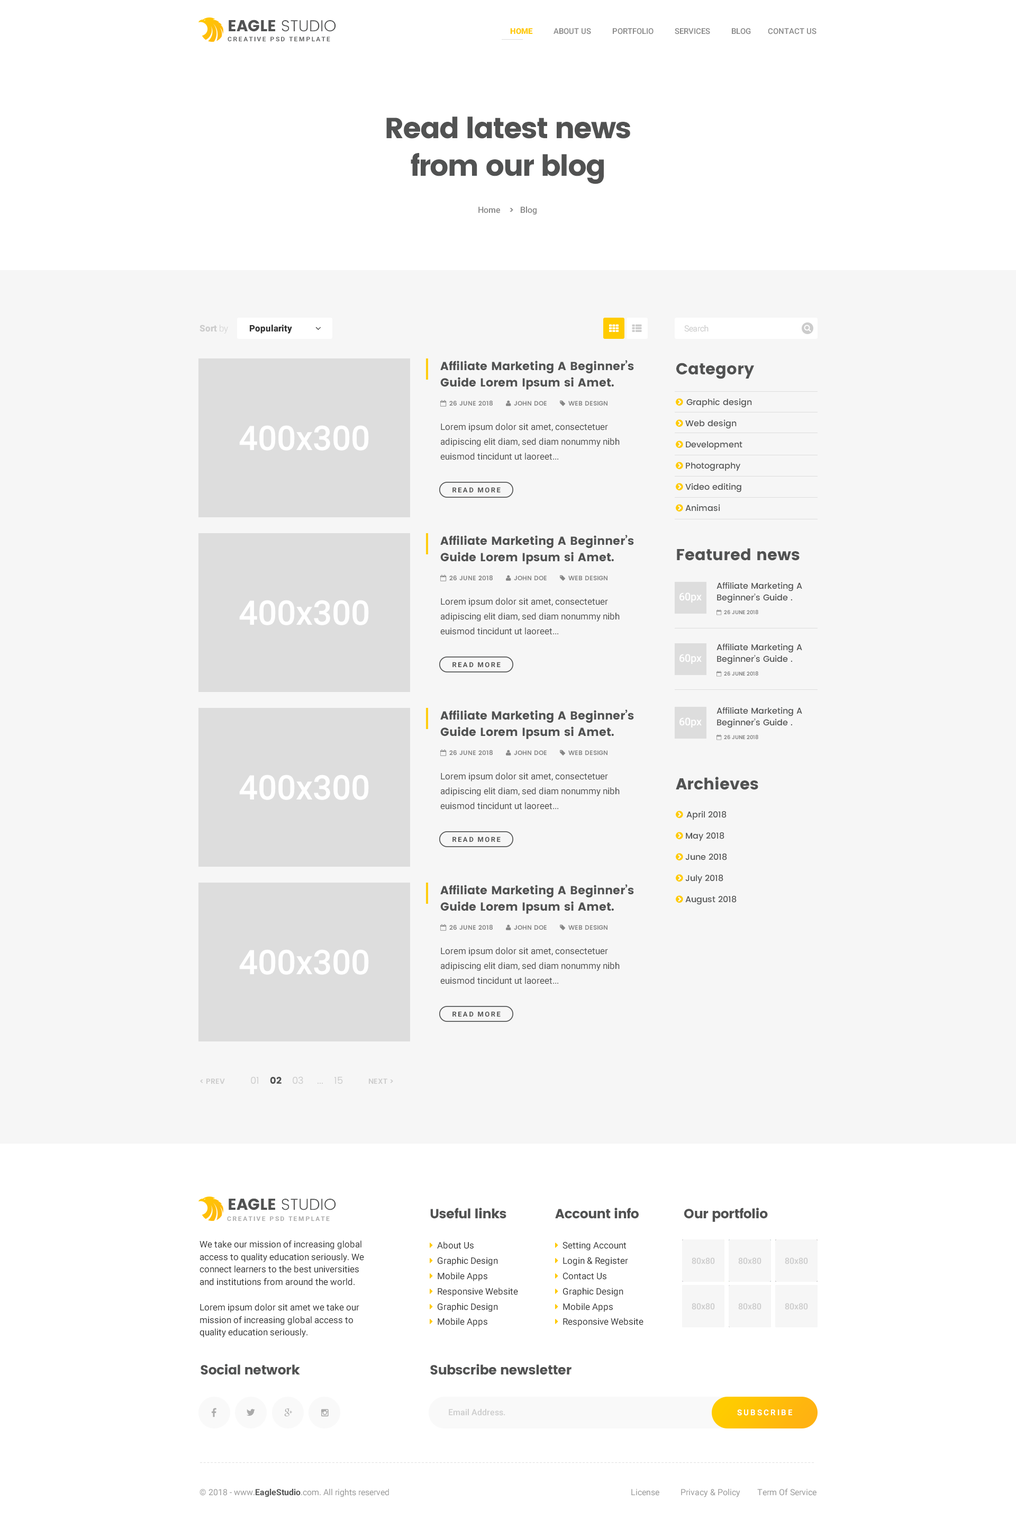
<style>
.page{position:relative;width:1016px;height:1528px;background:#f6f6f6}
.page>*{position:absolute;margin:0}
.t1{font:15.9px "Poppins-Light";color:#515253}
.t2{font:15.9px "Poppins";color:#515253}
.t3{font:7.9px "Roboto-Medium";color:#878787}
.t4{font:7.9px "Roboto-Black";color:#ffca00}
.t5{font:6.4px "Roboto-Bold";letter-spacing:0.2em;color:#636465}
.t6{font:29.1px/37.9px "Poppins";letter-spacing:-0.04em;color:#515252}
.t7{font:8.5px "Roboto-Medium";color:#878787}
.t8{font:8.5px "Poppins-SemiBold";color:#878787}
.t9{font:8.5px "Roboto-Regular";letter-spacing:-0.02em;color:#cccccc}
.t10{font:11.6px/16.3px "Poppins";color:#515252}
.t11{font:15.9px "Poppins";color:#515252}
.t12{font:9px/14.9px "Roboto-Regular";color:#4c4c4c}
.t13{font:6.9px "Roboto-Bold";letter-spacing:0.2em;color:#515252}
.t14{font:8.5px/11.9px "Poppins-Medium";color:#515252}
.t15{font:9.5px "Poppins-Regular";color:#cccccc}
.t16{font:7.4px "Poppins-SemiBold";color:#cccccc}
.t17{font:9.5px "Poppins";color:#515252}
.t18{font:15.9px "Poppins-Light";color:#515252}
.t19{font:6.4px "Roboto-Bold";letter-spacing:0.2em;color:#aaaaaa}
.t20{font:13.2px "Poppins";letter-spacing:-0.02em;color:#515252}
.t21{font:9px/12.6px "Roboto-Regular";color:#333333}
.t22{font:8.5px "Roboto-Medium";color:#cccccc}
.t23{font:7.9px "Roboto-Bold";letter-spacing:0.2em;color:#ffffff}
.t24{font:5.3px "Poppins-Light";letter-spacing:0.076em}
.t25{font:8.5px "Roboto-Regular";color:#999999}
.t26{font:8.5px "Roboto-Bold";color:#515252}
</style>
<div class="page">
<p class="t1" style="left:229px;top:20px;width:107px;height:12px"><span class="t2">EAGLE</span> STUDIO</p>
<p class="t3" style="left:510px;top:28px;width:307px;height:6px"><span class="t4">HOME </span>         ABOUT US          PORTFOLIO          SERVICES          BLOG        CONTACT US</p>
<p class="t5" style="left:228px;top:37px;width:102px;height:4px">CREATIVE PSD TEMPLATE</p>
<p class="t6" style="left:386px;top:116px;width:245px;height:68px;text-align:center">Read latest news from our blog</p>
<p class="t7" style="left:479px;top:206px;width:58px;height:9px">Home    <span class="t8">&gt;</span>   Blog</p>
<p class="t9" style="left:685px;top:325px;width:24px;height:7px">Search</p>
<p class="t10" style="left:440px;top:360px;width:194px;height:30px">Affiliate Marketing A Beginner’s Guide Lorem Ipsum si Amet.</p>
<p class="t11" style="left:677px;top:363px;width:77px;height:16px">Category</p>
<p class="t12" style="left:440px;top:423px;width:180px;height:37px">Lorem ipsum dolor sit amet, consectetuer adipiscing elit diam, sed diam nonummy nibh euismod tincidunt ut laoreet...</p>
<p class="t13" style="left:453px;top:487px;width:48px;height:6px">READ MORE</p>
<p class="t10" style="left:440px;top:535px;width:194px;height:29px">Affiliate Marketing A Beginner’s Guide Lorem Ipsum si Amet.</p>
<p class="t11" style="left:677px;top:548px;width:123px;height:13px">Featured news</p>
<p class="t14" style="left:717px;top:582px;width:86px;height:21px">Affiliate Marketing A Beginner’s Guide .</p>
<p class="t12" style="left:440px;top:598px;width:180px;height:37px">Lorem ipsum dolor sit amet, consectetuer adipiscing elit diam, sed diam nonummy nibh euismod tincidunt ut laoreet...</p>
<p class="t14" style="left:717px;top:643px;width:86px;height:21px">Affiliate Marketing A Beginner’s Guide .</p>
<p class="t13" style="left:453px;top:662px;width:48px;height:6px">READ MORE</p>
<p class="t10" style="left:440px;top:709px;width:194px;height:30px">Affiliate Marketing A Beginner’s Guide Lorem Ipsum si Amet.</p>
<p class="t14" style="left:717px;top:707px;width:86px;height:21px">Affiliate Marketing A Beginner’s Guide .</p>
<p class="t12" style="left:440px;top:772px;width:180px;height:37px">Lorem ipsum dolor sit amet, consectetuer adipiscing elit diam, sed diam nonummy nibh euismod tincidunt ut laoreet...</p>
<p class="t11" style="left:676px;top:777px;width:83px;height:13px">Archieves</p>
<p class="t13" style="left:453px;top:836px;width:48px;height:6px">READ MORE</p>
<p class="t10" style="left:440px;top:884px;width:194px;height:30px">Affiliate Marketing A Beginner’s Guide Lorem Ipsum si Amet.</p>
<p class="t12" style="left:440px;top:947px;width:180px;height:37px">Lorem ipsum dolor sit amet, consectetuer adipiscing elit diam, sed diam nonummy nibh euismod tincidunt ut laoreet...</p>
<p class="t13" style="left:453px;top:1011px;width:48px;height:6px">READ MORE</p>
<p class="t15" style="left:200px;top:1076px;width:193px;height:8px"><span class="t16">&lt; PREV        </span>01    <span class="t17">02 </span>   03     ...    15        <span class="t16">NEXT &gt;</span></p>
<p class="t18" style="left:229px;top:1198px;width:107px;height:12px"><span class="t11">EAGLE</span> STUDIO</p>
<p class="t19" style="left:227px;top:1216px;width:103px;height:5px">CREATIVE PSD TEMPLATE</p>
<p class="t20" style="left:430px;top:1208px;width:77px;height:11px">Useful links</p>
<p class="t20" style="left:555px;top:1208px;width:84px;height:11px">Account info</p>
<p class="t20" style="left:684px;top:1208px;width:84px;height:14px">Our portfolio</p>
<p class="t21" style="left:200px;top:1240px;width:164px;height:97px">We take our mission of increasing global access to quality education seriously. We connect learners to the best universities and institutions from around the world.<br><br>Lorem ipsum dolor sit amet we take our mission of increasing global access to quality education seriously.</p>
<p class="t20" style="left:201px;top:1364px;width:99px;height:11px">Social network</p>
<p class="t20" style="left:430px;top:1364px;width:142px;height:11px">Subscribe newsletter</p>
<p class="t22" style="left:449px;top:1409px;width:57px;height:7px">Email Address.</p>
<p class="t23" style="left:737px;top:1409px;width:56px;height:7px">SUBSCRIBE</p>
<p class="t24" style="left:200px;top:1462px;width:614px;height:1px">----------------------------------------------------------------------------------------------------------------------------------------------------------------------------</p>
<p class="t25" style="left:200px;top:1489px;width:189px;height:8px">© 2018 - www.<span class="t26">EagleStudio</span>.com. All rights reserved</p>
<p class="t25" style="left:632px;top:1488px;width:185px;height:9px">License          Privacy &amp; Policy        Term Of Service</p>
</div>
